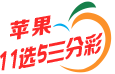
<style>
.page{position:relative;width:115px;height:74px;background:#ffffff}
.page>*{position:absolute;margin:0}
.t1{font:21.4px "FZZDHJW--GB1-0";letter-spacing:0.095em;color:#fc2929}
.t2{font:26px "HYShuYuanHeiJ";letter-spacing:0.014em;color:#fc2929;scale:0.71 1}
.t3{font:30px "HYShuYuanHeiJ";letter-spacing:0.014em;color:#fc2929;scale:0.71 1}
</style>
<div class="page">
<p class="t1" style="left:10px;top:15px;width:41px;height:25px;rotate:-10deg">苹果</p>
<p class="t2" style="left:0px;top:32px;width:103px;height:39px;rotate:-11deg"><span class="t3">11</span>选<span class="t3">5</span>三分彩</p>
</div>
